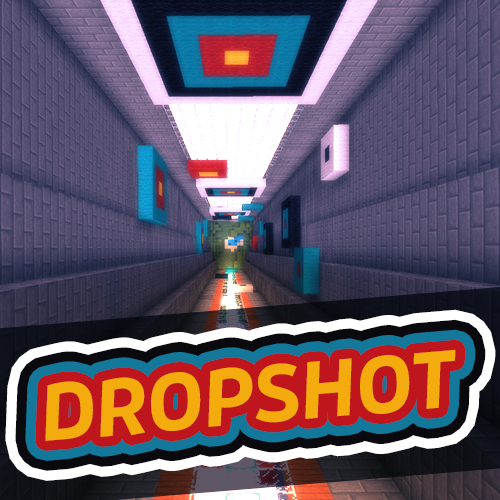
<style>
.page{position:relative;width:500px;height:500px}
.page>*{position:absolute;margin:0}
.t1{font:80.6px "EnzoOT-BoldIta";letter-spacing:0.01em;color:#f4ab0e}
</style>
<div class="page">
<p class="t1" style="left:45px;top:349px;width:411px;height:92px;rotate:-5deg">DROPSHOT</p>
</div>
